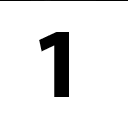
<style>
.page{position:relative;width:128px;height:128px;background:#ffffff}
.page>*{position:absolute;margin:0}
.t1{font:100px "MyriadHebrew-Bold";color:#000000}
</style>
<div class="page">
<p class="t1" style="left:39px;top:31px;width:30px;height:65px">1</p>
</div>
